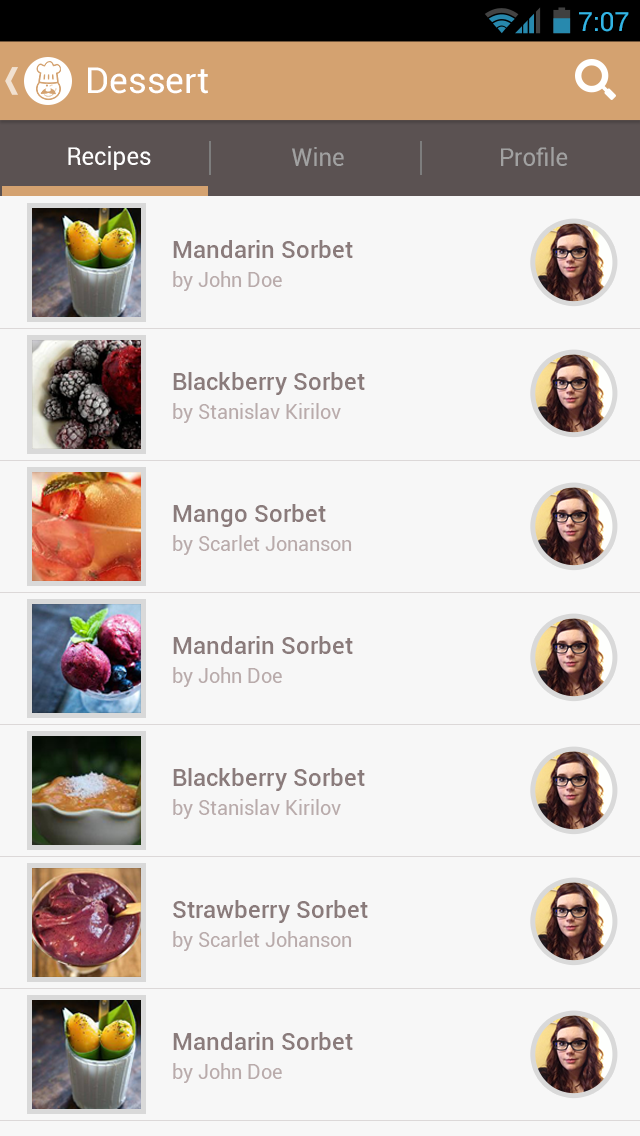
<style>
.page{position:relative;width:640px;height:1136px;background:#f7f7f7}
.page>*{position:absolute;margin:0}
.t1{font:26.6px "Roboto-Regular";color:#33b5e5}
.t2{font:35.8px "Roboto-Regular";color:#ffffff}
.t3{font:25px "Roboto-Regular";color:#fefefe;scale:0.96 1}
.t4{font:25px "Roboto-Regular";color:#a1a1a1;scale:0.96 1}
.t5{font:24px "Roboto-Medium";color:#8a7b7b}
.t6{font:20px "Roboto-Regular";color:#b9abab}
</style>
<div class="page">
<p class="t1" style="left:579px;top:12px;width:50px;height:20px">7:07</p>
<p class="t2" style="left:88px;top:67px;width:120px;height:27px">Dessert</p>
<p class="t3" style="left:68px;top:146px;width:83px;height:24px">Recipes</p>
<p class="t4" style="left:292px;top:147px;width:52px;height:19px">Wine</p>
<p class="t4" style="left:501px;top:147px;width:67px;height:19px">Profile</p>
<p class="t5" style="left:173px;top:240px;width:180px;height:18px">Mandarin Sorbet</p>
<p class="t6" style="left:173px;top:271px;width:109px;height:20px">by John Doe</p>
<p class="t5" style="left:173px;top:372px;width:192px;height:23px">Blackberry Sorbet</p>
<p class="t6" style="left:173px;top:403px;width:168px;height:20px">by Stanislav Kirilov</p>
<p class="t5" style="left:173px;top:504px;width:153px;height:23px">Mango Sorbet</p>
<p class="t6" style="left:173px;top:535px;width:179px;height:20px">by Scarlet Jonanson</p>
<p class="t5" style="left:173px;top:636px;width:180px;height:18px">Mandarin Sorbet</p>
<p class="t6" style="left:173px;top:667px;width:109px;height:20px">by John Doe</p>
<p class="t5" style="left:173px;top:768px;width:192px;height:23px">Blackberry Sorbet</p>
<p class="t6" style="left:173px;top:799px;width:168px;height:20px">by Stanislav Kirilov</p>
<p class="t5" style="left:173px;top:900px;width:195px;height:23px">Strawberry Sorbet</p>
<p class="t6" style="left:173px;top:931px;width:179px;height:20px">by Scarlet Johanson</p>
<p class="t5" style="left:173px;top:1032px;width:180px;height:18px">Mandarin Sorbet</p>
<p class="t6" style="left:173px;top:1063px;width:109px;height:20px">by John Doe</p>
</div>
